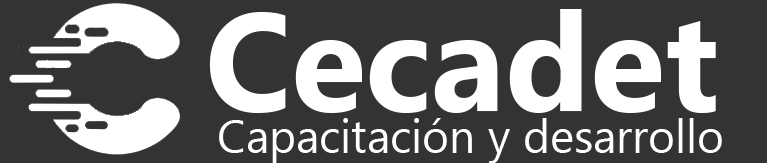
<style>
.page{position:relative;width:767px;height:163px;background:#333333}
.page>*{position:absolute;margin:0}
.t1{font:137.5px "MicrosoftNewTaiLue-Bold";color:#ffffff}
.t2{font:45.8px "MicrosoftNewTaiLue";color:#ffffff}
</style>
<div class="page">
<p class="t1" style="left:209px;top:9px;width:507px;height:104px">Cecadet</p>
<p class="t2" style="left:219px;top:118px;width:503px;height:46px">Capacitación y desarrollo</p>
</div>
